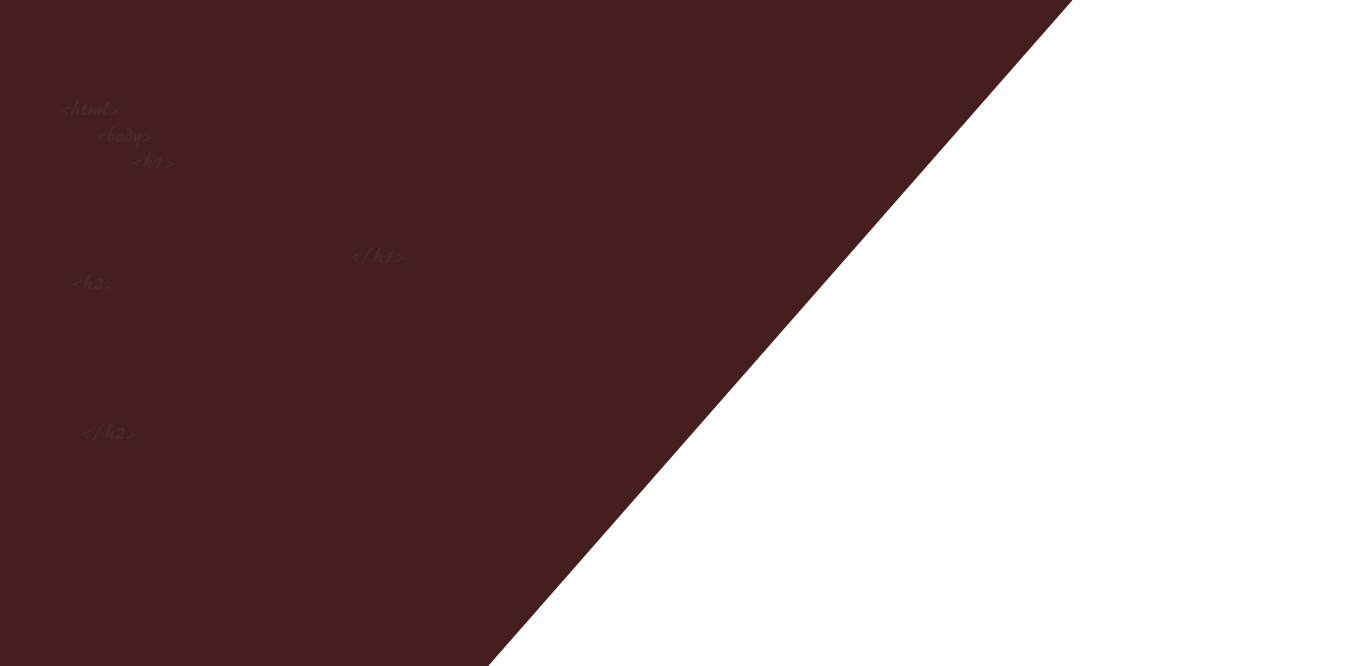
<style>
.page{position:relative;width:1348px;height:666px;background:#451e1f}
.page>*{position:absolute;margin:0}
.t1{font:22px "ARBERKLEY";color:#4b292a;scale:1.05 1}
</style>
<div class="page">
<p class="t1" style="left:60px;top:99px;width:115px;height:70px">&lt;html&gt;<br> &lt;body&gt;<br>  &lt;h1&gt;</p>
<p class="t1" style="left:349px;top:246px;width:56px;height:18px">&lt;/h1&gt;</p>
<p class="t1" style="left:72px;top:273px;width:43px;height:17px">&lt;h2&gt;</p>
<p class="t1" style="left:81px;top:423px;width:56px;height:18px">&lt;/h2&gt;</p>
</div>
